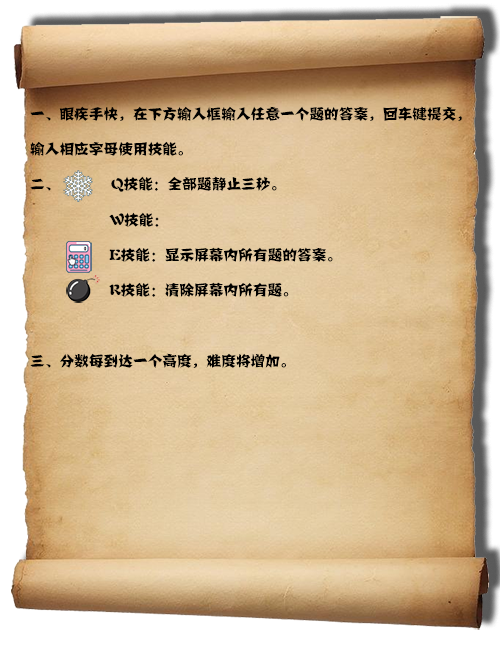
<style>
.page{position:relative;width:500px;height:646px}
.page>*{position:absolute;margin:0}
.t1{font:14.7px/35.3px "FZJZJW--GB1-0";color:#000000}
</style>
<div class="page">
<p class="t1" style="left:30px;top:106px;width:432px;height:262px">一、眼疾手快，在下方输入框输入任意一个题的答案，回车键提交，输入相应字母使用技能。<br>二、              Q技能：全部题静止三秒。<br>   W技能：<br>   E技能：显示屏幕内所有题的答案。<br>   R技能：清除屏幕内所有题。<br>  <br>三、分数每到达一个高度，难度将增加。</p>
</div>
